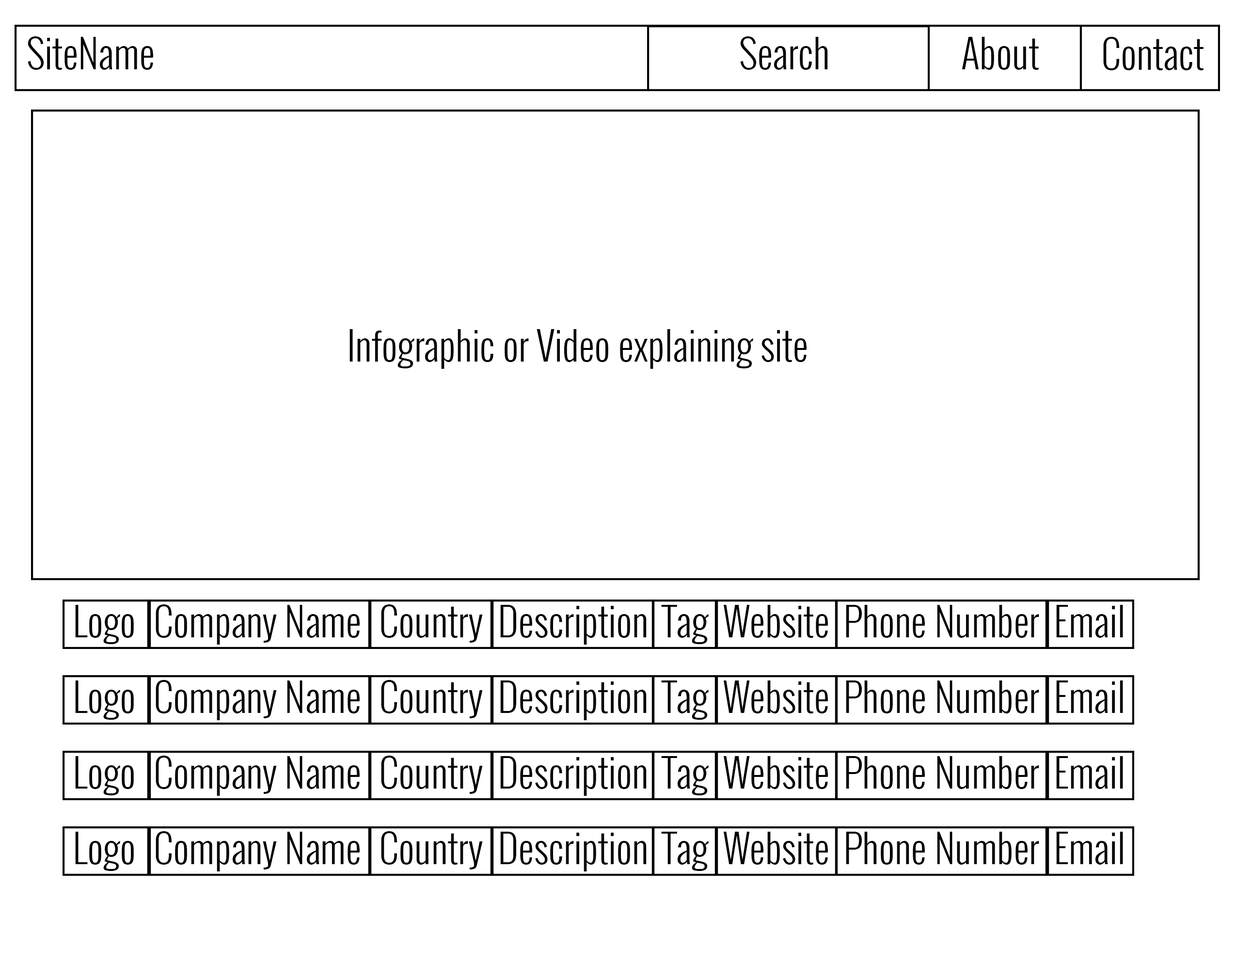
<style>
.page{position:relative;width:1236px;height:964px;background:#ffffff}
.page>*{position:absolute;margin:0}
.t1{font:38.8px "Oswald-Light";color:#000000}
</style>
<div class="page">
<p class="t1" style="left:28px;top:36px;width:125px;height:34px">SiteName</p>
<p class="t1" style="left:740px;top:36px;width:88px;height:34px">Search</p>
<p class="t1" style="left:962px;top:37px;width:77px;height:33px">About</p>
<p class="t1" style="left:1104px;top:37px;width:100px;height:33px">Contact</p>
<p class="t1" style="left:350px;top:329px;width:457px;height:40px">Infographic or Video explaining site</p>
<p class="t1" style="left:75px;top:605px;width:59px;height:39px">Logo</p>
<p class="t1" style="left:156px;top:605px;width:204px;height:40px">Company Name</p>
<p class="t1" style="left:381px;top:605px;width:102px;height:38px">Country</p>
<p class="t1" style="left:500px;top:605px;width:147px;height:40px">Description</p>
<p class="t1" style="left:661px;top:605px;width:48px;height:39px">Tag</p>
<p class="t1" style="left:723px;top:605px;width:105px;height:33px">Website</p>
<p class="t1" style="left:846px;top:605px;width:194px;height:33px">Phone Number</p>
<p class="t1" style="left:1057px;top:605px;width:66px;height:33px">Email</p>
<p class="t1" style="left:75px;top:681px;width:59px;height:39px">Logo</p>
<p class="t1" style="left:156px;top:680px;width:204px;height:41px">Company Name</p>
<p class="t1" style="left:381px;top:680px;width:102px;height:39px">Country</p>
<p class="t1" style="left:500px;top:681px;width:147px;height:40px">Description</p>
<p class="t1" style="left:661px;top:681px;width:48px;height:39px">Tag</p>
<p class="t1" style="left:723px;top:681px;width:105px;height:33px">Website</p>
<p class="t1" style="left:846px;top:681px;width:194px;height:33px">Phone Number</p>
<p class="t1" style="left:1057px;top:681px;width:66px;height:33px">Email</p>
<p class="t1" style="left:75px;top:756px;width:59px;height:40px">Logo</p>
<p class="t1" style="left:156px;top:756px;width:204px;height:40px">Company Name</p>
<p class="t1" style="left:381px;top:756px;width:102px;height:38px">Country</p>
<p class="t1" style="left:500px;top:756px;width:147px;height:40px">Description</p>
<p class="t1" style="left:661px;top:756px;width:48px;height:40px">Tag</p>
<p class="t1" style="left:723px;top:756px;width:105px;height:33px">Website</p>
<p class="t1" style="left:846px;top:756px;width:194px;height:33px">Phone Number</p>
<p class="t1" style="left:1057px;top:756px;width:66px;height:33px">Email</p>
<p class="t1" style="left:75px;top:832px;width:59px;height:39px">Logo</p>
<p class="t1" style="left:156px;top:832px;width:204px;height:40px">Company Name</p>
<p class="t1" style="left:381px;top:832px;width:102px;height:38px">Country</p>
<p class="t1" style="left:500px;top:832px;width:147px;height:40px">Description</p>
<p class="t1" style="left:661px;top:832px;width:48px;height:39px">Tag</p>
<p class="t1" style="left:723px;top:832px;width:105px;height:33px">Website</p>
<p class="t1" style="left:846px;top:832px;width:194px;height:33px">Phone Number</p>
<p class="t1" style="left:1057px;top:832px;width:66px;height:33px">Email</p>
</div>
